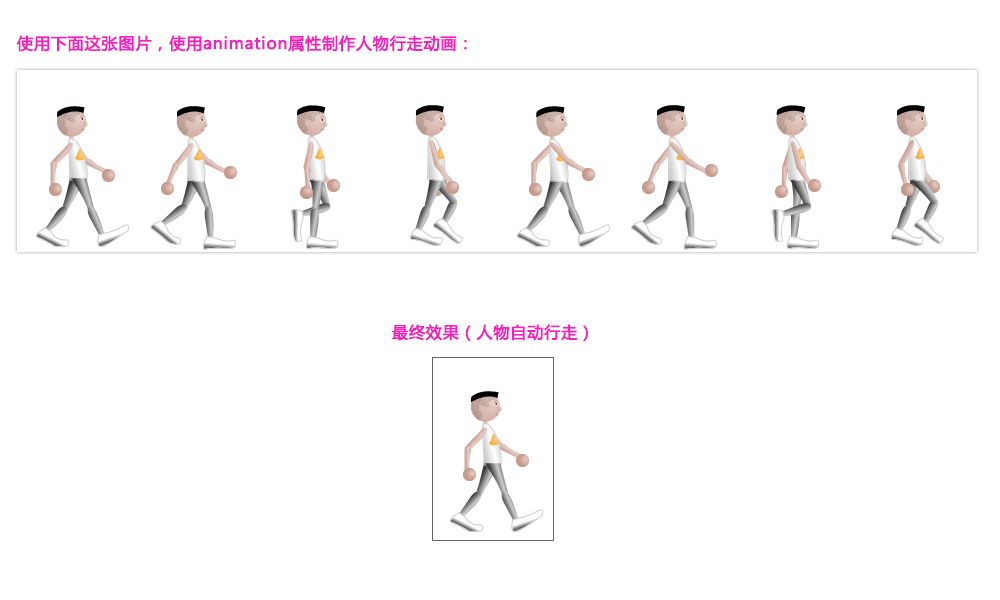
<style>
.page{position:relative;width:1000px;height:600px;background:#ffffff}
.page>*{position:absolute;margin:0}
.t1{font:16px "MicrosoftYaHei";letter-spacing:0.03em;color:#f520bb;font-weight:bold}
</style>
<div class="page">
<p class="t1" style="left:16px;top:35px;width:451px;height:17px">使用下面这张图片，使用animation属性制作人物行走动画：</p>
<p class="t1" style="left:392px;top:324px;width:196px;height:17px">最终效果（人物自动行走）</p>
</div>
